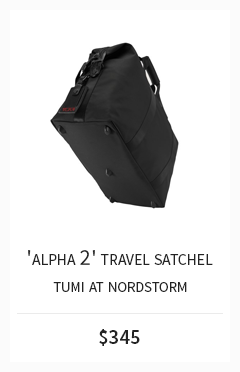
<style>
.page{position:relative;width:240px;height:372px;background:#ffffff}
.page>*{position:absolute;margin:0}
.t1{font:22.2px "SourceSansPro-Regular";color:#232323;font-variant:small-caps}
.t2{font:20.8px "SourceSansPro-Regular";color:#232323;font-variant:small-caps}
.t3{font:20.6px "SourceSansPro-Semibold";color:#232323}
</style>
<div class="page">
<p class="t1" style="left:28px;top:250px;width:185px;height:15px">'alpha 2' travel satchel</p>
<p class="t2" style="left:53px;top:282px;width:134px;height:10px">tumi at nordstorm</p>
<p class="t3" style="left:99px;top:329px;width:41px;height:17px">$345</p>
</div>
